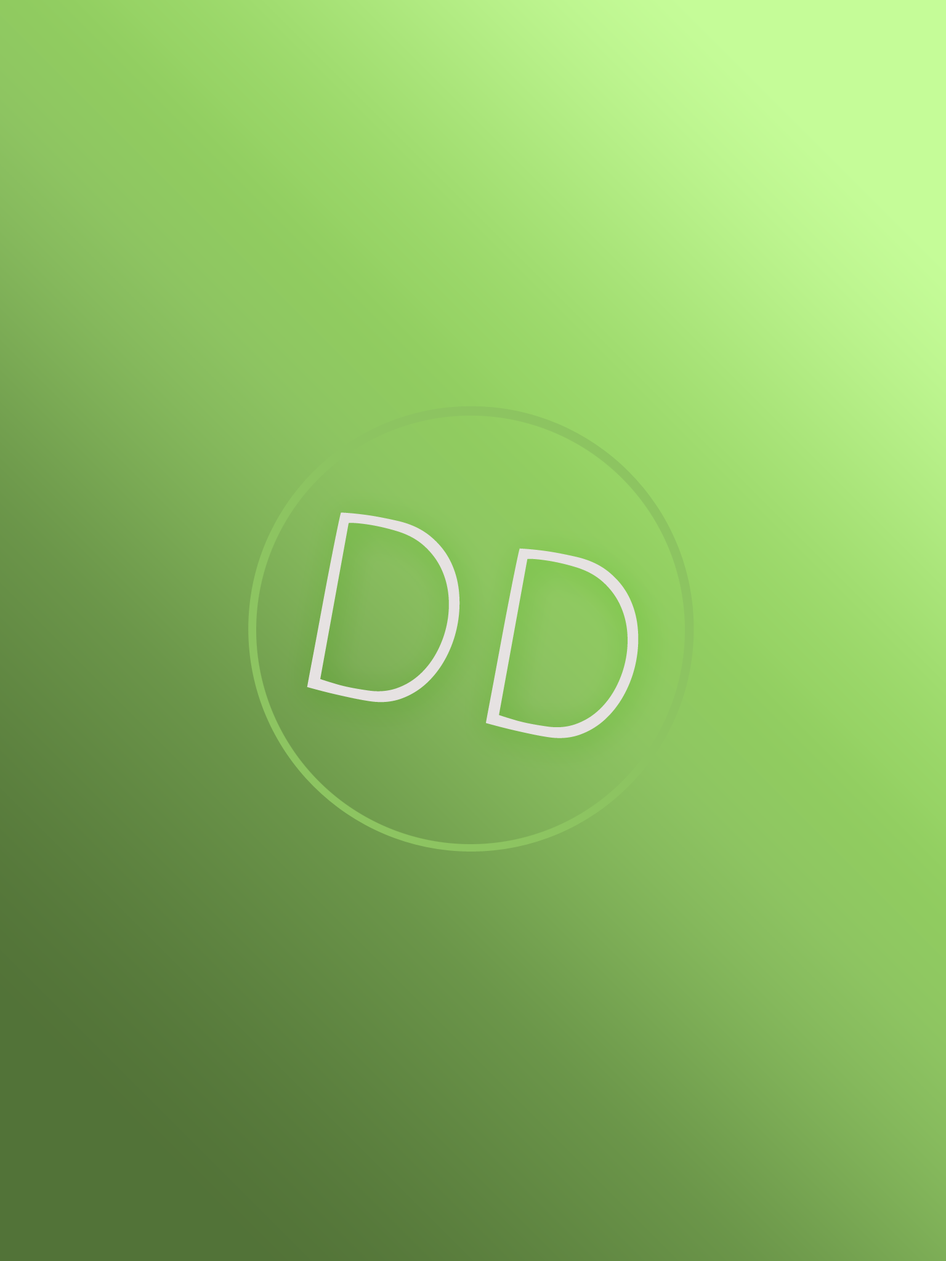
<style>
.page{position:relative;width:946px;height:1261px}
.page>*{position:absolute;margin:0}
.t1{font:246.3px "cafbrewery";letter-spacing:0.14em;color:#e6e2e2}
</style>
<div class="page">
<p class="t1" style="left:307px;top:512px;width:331px;height:226px;rotate:11deg">DD</p>
</div>
